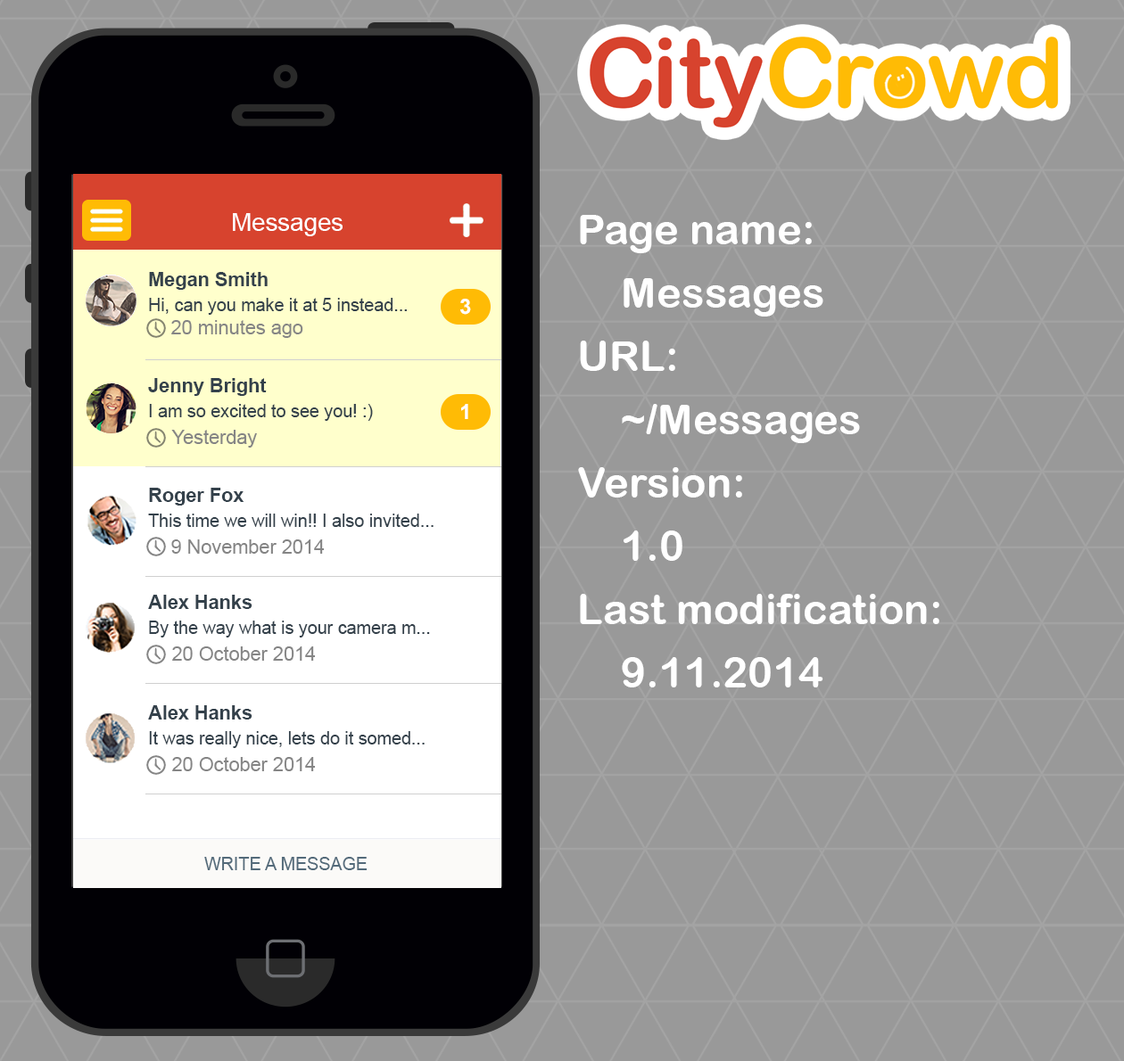
<style>
.page{position:relative;width:1124px;height:1061px;background:#999999}
.page>*{position:absolute;margin:0}
.t1{font:24.6px "ArialMT";color:#ffffff}
.t2{font:42.2px/63.3px "ArialRoundedMTBold";color:#ffffff}
.t3{font:17.6px/24.6px "ArialMT";color:#34414b}
.t4{font:19.3px/24.6px "Arial-BoldMT";color:#34414b}
.t5{font:21.1px "Arial-BoldMT";color:#ffffff}
.t6{font:19.3px "ArialMT";color:#858585}
.t7{font:17.6px "ArialMT";color:#536a7a}
</style>
<div class="page">
<p class="t1" style="left:233px;top:213px;width:109px;height:23px">Messages</p>
<p class="t2" style="left:578px;top:215px;width:361px;height:473px">Page name:<br>Messages<br>URL:<br>~/Messages<br>Version:<br>1.0<br>Last modification:<br>9.11.2014</p>
<p class="t3" style="left:149px;top:272px;width:258px;height:43px"><span class="t4">Megan Smith<br></span>Hi, can you make it at 5 instead...</p>
<p class="t5" style="left:460px;top:299px;width:11px;height:16px">3</p>
<p class="t6" style="left:171px;top:320px;width:132px;height:18px">20 minutes ago</p>
<p class="t3" style="left:148px;top:378px;width:225px;height:43px"><span class="t4">Jenny Bright<br></span>I am so excited to see you! :)</p>
<p class="t5" style="left:461px;top:404px;width:7px;height:15px">1</p>
<p class="t6" style="left:171px;top:430px;width:86px;height:18px">Yesterday</p>
<p class="t3" style="left:148px;top:488px;width:285px;height:39px"><span class="t4">Roger Fox<br></span>This time we will win!! I also invited...</p>
<p class="t6" style="left:171px;top:540px;width:154px;height:14px">9 November 2014</p>
<p class="t3" style="left:148px;top:595px;width:282px;height:43px"><span class="t4">Alex Hanks<br></span>By the way what is your camera m...</p>
<p class="t6" style="left:172px;top:647px;width:144px;height:14px">20 October 2014</p>
<p class="t3" style="left:148px;top:705px;width:276px;height:43px"><span class="t4">Alex Hanks<br></span>It was really nice, lets do it somed...</p>
<p class="t6" style="left:172px;top:757px;width:144px;height:14px">20 October 2014</p>
<p class="t7" style="left:204px;top:857px;width:163px;height:13px">WRITE A MESSAGE</p>
</div>
